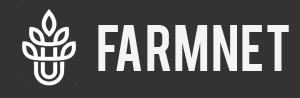
<style>
.page{position:relative;width:300px;height:98px;background:#333333}
.page>*{position:absolute;margin:0}
.t1{font:50.7px "Bebas";color:#f2f5f3}
</style>
<div class="page">
<p class="t1" style="left:98px;top:25px;width:191px;height:46px">FARMNET</p>
</div>
